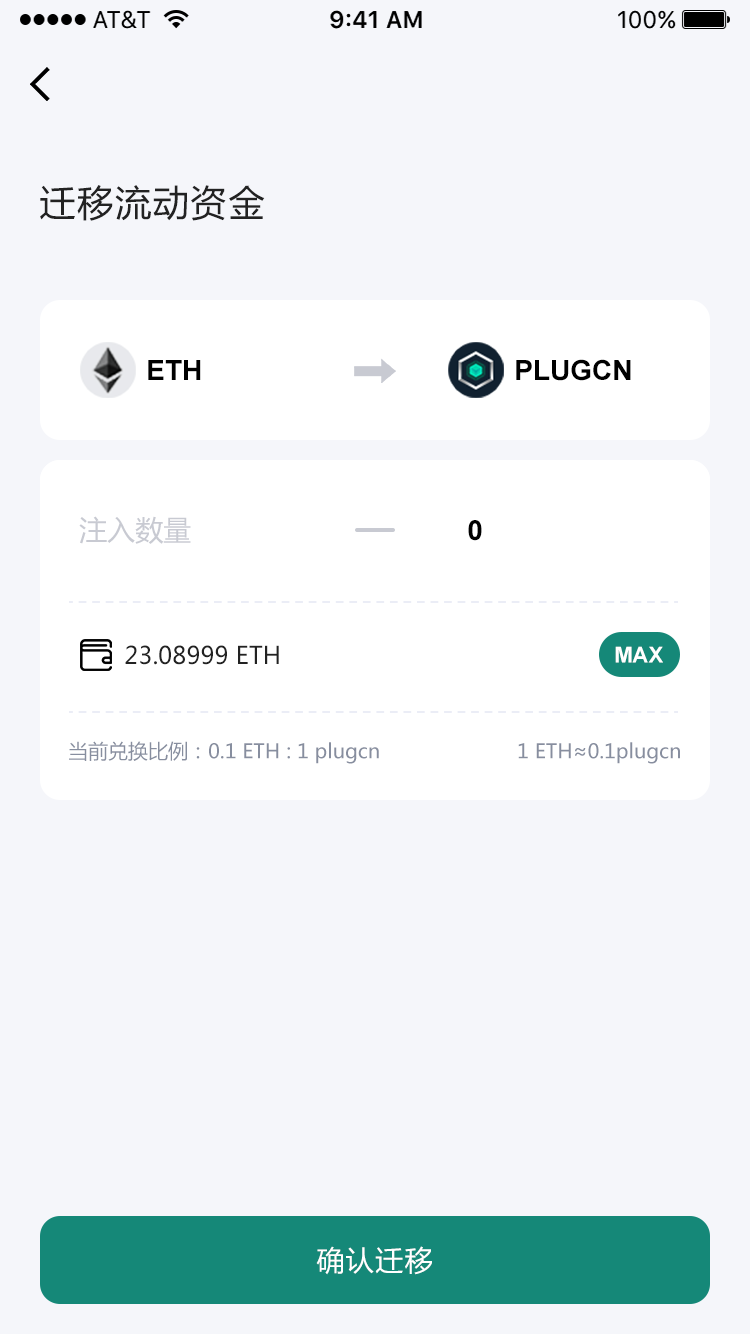
<style>
.page{position:relative;width:750px;height:1334px;background:#f5f6fa}
.page>*{position:absolute;margin:0}
.t1{font:36px "MicrosoftYaHei";letter-spacing:0.05em;color:#222222}
.t2{font:28px "Arial-BoldMT";color:#000000}
.t3{font:28px "MicrosoftYaHei";color:#c8cad2}
.t4{font:24px "MicrosoftYaHei";color:#222222}
.t5{font:22px "Arial-BoldMT";color:#ffffff}
.t6{font:20px "MicrosoftYaHei";color:#878e9f}
.t7{font:28px "MicrosoftYaHei";letter-spacing:0.05em;color:#ffffff}
</style>
<div class="page">
<p class="t1" style="left:40px;top:185px;width:225px;height:36px">迁移流动资金</p>
<p class="t2" style="left:148px;top:360px;width:53px;height:20px">ETH</p>
<p class="t2" style="left:516px;top:359px;width:115px;height:22px">PLUGCN</p>
<p class="t3" style="left:79px;top:516px;width:112px;height:28px">注入数量</p>
<p class="t2" style="left:468px;top:520px;width:14px;height:21px">0</p>
<p class="t4" style="left:125px;top:645px;width:154px;height:20px">23.08999 ETH</p>
<p class="t5" style="left:615px;top:646px;width:48px;height:17px">MAX</p>
<p class="t6" style="left:69px;top:741px;width:310px;height:23px">当前兑换比例：0.1 ETH : 1 plugcn</p>
<p class="t6" style="left:518px;top:742px;width:162px;height:22px">1 ETH≈0.1plugcn</p>
<p class="t7" style="left:316px;top:1246px;width:116px;height:29px">确认迁移</p>
</div>
